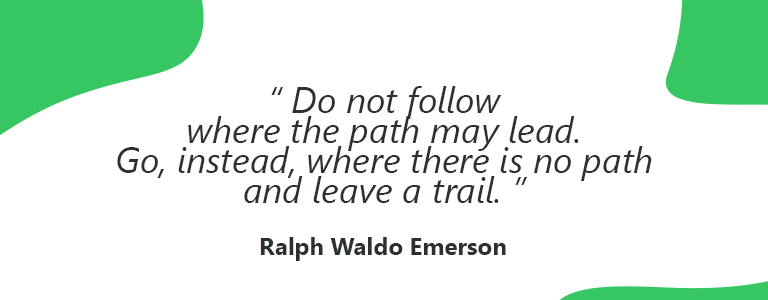
<style>
.page{position:relative;width:768px;height:300px;background:#ffffff}
.page>*{position:absolute;margin:0}
.t1{font:36px/30px "SegoeUI-Italic";color:#2b3131}
.t2{font:24px "SegoeUI-Bold";color:#2b3131}
</style>
<div class="page">
<p class="t1" style="left:117px;top:86px;width:535px;height:117px;text-align:center">“ Do not follow<br>where the path may lead.<br>Go, instead, where there is no path<br>and leave a trail. ”</p>
<p class="t2" style="left:260px;top:237px;width:246px;height:24px">Ralph Waldo Emerson</p>
</div>
